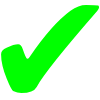
<style>
.page{position:relative;width:100px;height:100px;background:#ffffff}
.page>*{position:absolute;margin:0}
.t1{font:161.8px "DejaVuSans";color:#00ff00}
</style>
<div class="page">
<p class="t1" style="left:1px;top:5px;width:98px;height:88px">✔</p>
</div>
